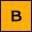
<style>
.page{position:relative;width:32px;height:32px;background:#ffae00}
.page>*{position:absolute;margin:0}
.t1{font:14.1px "Verdana";color:#000000;font-weight:bold;scale:1.25 1}
</style>
<div class="page">
<p class="t1" style="left:11px;top:10px;width:11px;height:12px">B</p>
</div>
